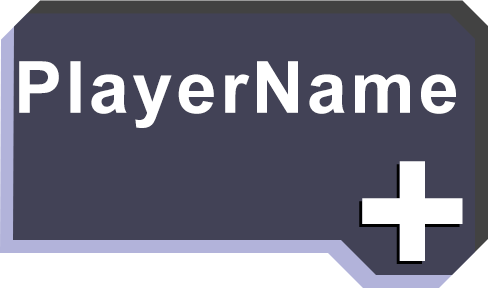
<style>
.page{position:relative;width:489px;height:288px;background:#424256}
.page>*{position:absolute;margin:0}
.t1{font:72px "Arial-BoldMT";letter-spacing:0.05em;color:#ffffff}
</style>
<div class="page">
<p class="t1" style="left:19px;top:61px;width:437px;height:67px">PlayerName</p>
</div>
